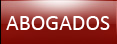
<style>
.page{position:relative;width:117px;height:44px}
.page>*{position:absolute;margin:0}
.t1{font:22px "Calibri";color:#ffffff}
</style>
<div class="page">
<p class="t1" style="left:6px;top:16px;width:104px;height:14px">ABOGADOS</p>
</div>
